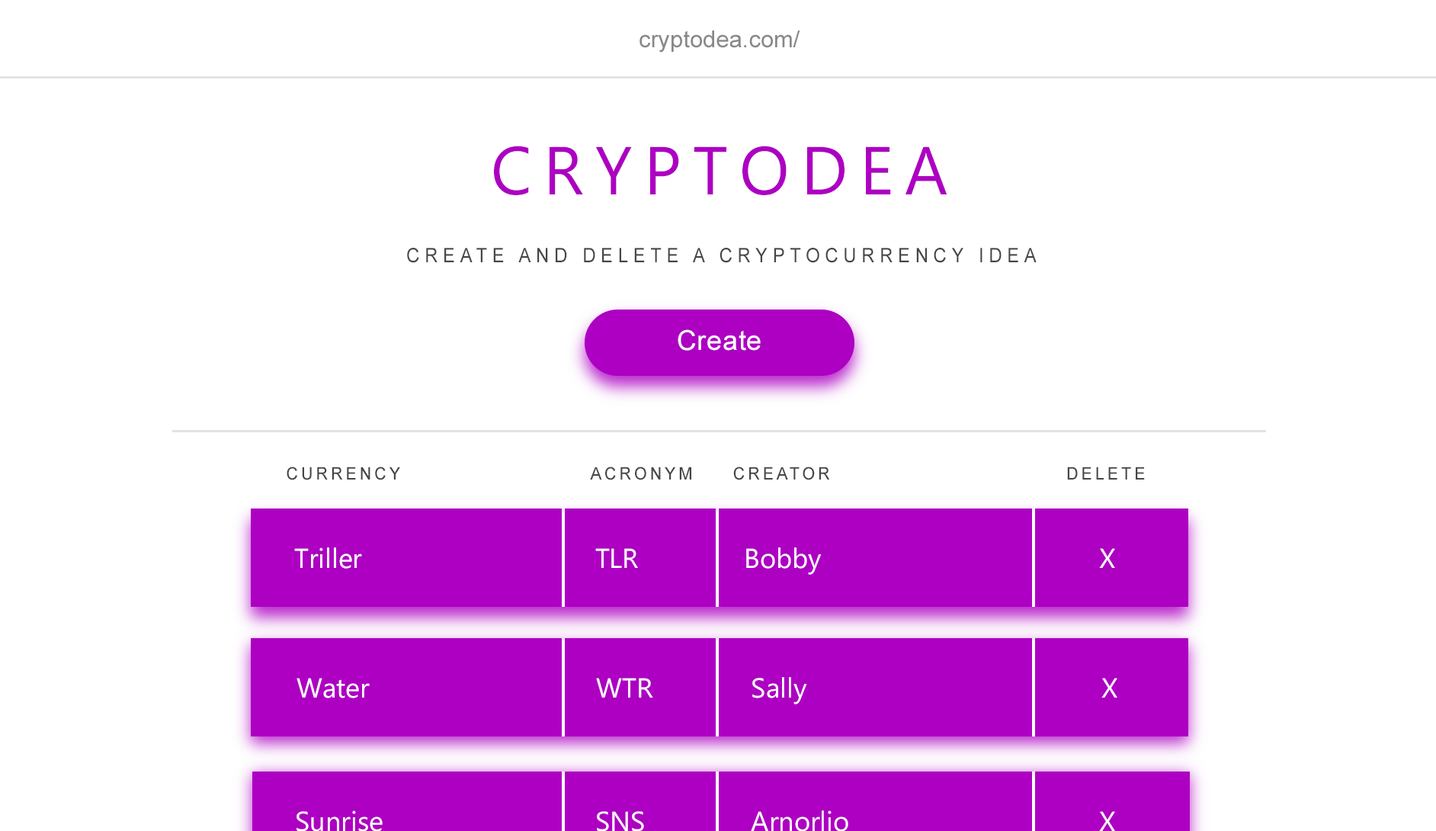
<style>
.page{position:relative;width:1436px;height:831px;background:#ffffff}
.page>*{position:absolute;margin:0}
.t1{font:23.2px "ArialMT";color:#888888}
.t2{font:67.8px "Ebrima";letter-spacing:0.18em;color:#ad00c2}
.t3{font:20px "ArialMT";letter-spacing:0.28em;color:#464646;scale:0.91 1}
.t4{font:27.4px "ArialMT";letter-spacing:0.02em;color:#ffffff}
.t5{font:17.4px "ArialMT";letter-spacing:0.18em;color:#464646;scale:0.95 1}
.t6{font:27.4px "Ebrima";color:#ffffff}
</style>
<div class="page">
<p class="t1" style="left:639px;top:30px;width:161px;height:23px">cryptodea.com/</p>
<p class="t2" style="left:494px;top:146px;width:453px;height:49px">CRYPTODEA</p>
<p class="t3" style="left:407px;top:248px;width:629px;height:15px">CREATE AND DELETE A CRYPTOCURRENCY IDEA</p>
<p class="t4" style="left:677px;top:329px;width:83px;height:22px">Create</p>
<p class="t5" style="left:287px;top:466px;width:858px;height:14px">CURRENCY                         ACRONYM     CREATOR                               DELETE</p>
<p class="t6" style="left:294px;top:547px;width:821px;height:28px">Triller                               TLR              Bobby                                     X</p>
<p class="t6" style="left:296px;top:677px;width:821px;height:27px">Water                              WTR             Sally                                       X</p>
<p class="t6" style="left:296px;top:810px;width:819px;height:21px">Sunrise                            SNS              Arnorlio                                 X</p>
</div>
